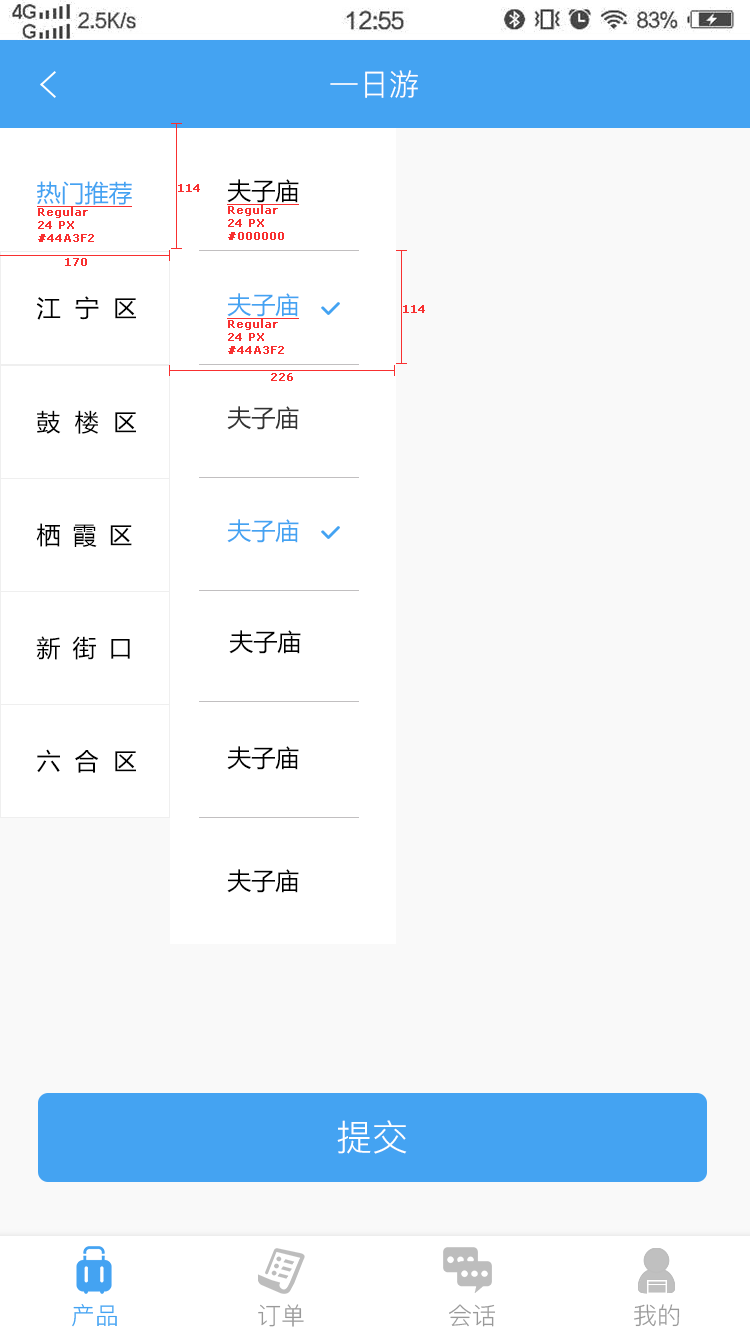
<style>
.page{position:relative;width:750px;height:1334px;background:#f9f9f9}
.page>*{position:absolute;margin:0}
.t1{font:30px "PingFang-SC-Regular";color:#ffffff;text-transform:uppercase}
.t2{font:24px "MicrosoftYaHei";color:#44a3f2}
.t3{font:11px "Verdana";color:#f83030;font-weight:bold}
.t4{font:24px "MicrosoftYaHei";color:#000000}
.t5{font:24px "MicrosoftYaHei";color:#333333}
.t6{font:24px "MicrosoftYaHei";letter-spacing:0.5em;color:#000000}
.t7{font:36px "PingFang-SC-Regular";color:#ffffff;text-transform:uppercase}
.t8{font:24px "PingFang-SC-Regular";color:#44a3f2;text-transform:uppercase}
.t9{font:24px "PingFang-SC-Regular";color:#999999;text-transform:uppercase}
</style>
<div class="page">
<p class="t1" style="left:330px;top:70px;width:88px;height:28px">一日游</p>
<p class="t2" style="left:37px;top:181px;width:95px;height:24px">热门推荐</p>
<p class="t3" style="left:178px;top:184px;width:22px;height:8px">114</p>
<p class="t4" style="left:227px;top:179px;width:72px;height:24px">夫子庙</p>
<p class="t3" style="left:38px;top:207px;width:56px;height:35px">Regular<br>24 PX<br>#44A3F2</p>
<p class="t3" style="left:228px;top:205px;width:56px;height:35px">Regular<br>24 PX<br>#000000</p>
<p class="t3" style="left:65px;top:258px;width:22px;height:8px">170</p>
<p class="t2" style="left:227px;top:293px;width:72px;height:24px">夫子庙</p>
<p class="t4" style="left:36px;top:296px;width:100px;height:24px">江  宁  区</p>
<p class="t3" style="left:403px;top:305px;width:22px;height:8px">114</p>
<p class="t3" style="left:228px;top:319px;width:56px;height:35px">Regular<br>24 PX<br>#44A3F2</p>
<p class="t3" style="left:271px;top:373px;width:22px;height:8px">226</p>
<p class="t4" style="left:37px;top:410px;width:99px;height:24px">鼓  楼  区</p>
<p class="t5" style="left:227px;top:406px;width:72px;height:24px">夫子庙</p>
<p class="t2" style="left:227px;top:519px;width:72px;height:24px">夫子庙</p>
<p class="t6" style="left:36px;top:523px;width:96px;height:24px">栖霞区</p>
<p class="t4" style="left:229px;top:630px;width:72px;height:24px">夫子庙</p>
<p class="t6" style="left:36px;top:636px;width:94px;height:24px">新街口</p>
<p class="t4" style="left:37px;top:749px;width:99px;height:24px">六  合  区</p>
<p class="t4" style="left:227px;top:746px;width:72px;height:24px">夫子庙</p>
<p class="t4" style="left:227px;top:869px;width:72px;height:24px">夫子庙</p>
<p class="t7" style="left:337px;top:1120px;width:70px;height:34px">提交</p>
<p class="t8" style="left:72px;top:1304px;width:45px;height:23px">产品</p>
<p class="t9" style="left:258px;top:1304px;width:46px;height:23px">订单</p>
<p class="t9" style="left:449px;top:1304px;width:46px;height:23px">会话</p>
<p class="t9" style="left:634px;top:1304px;width:46px;height:23px">我的</p>
</div>
